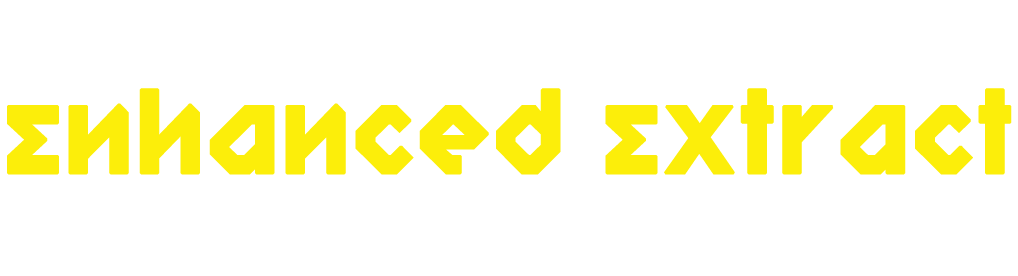
<style>
.page{position:relative;width:1018px;height:276px;background:#ffffff}
.page>*{position:absolute;margin:0}
.t1{font:97px "RelishGargler-Regular";letter-spacing:0.04em;color:#fcee0a;font-weight:bold}
</style>
<div class="page">
<p class="t1" style="left:7px;top:88px;width:1005px;height:87px">Enhanced Extract</p>
</div>
